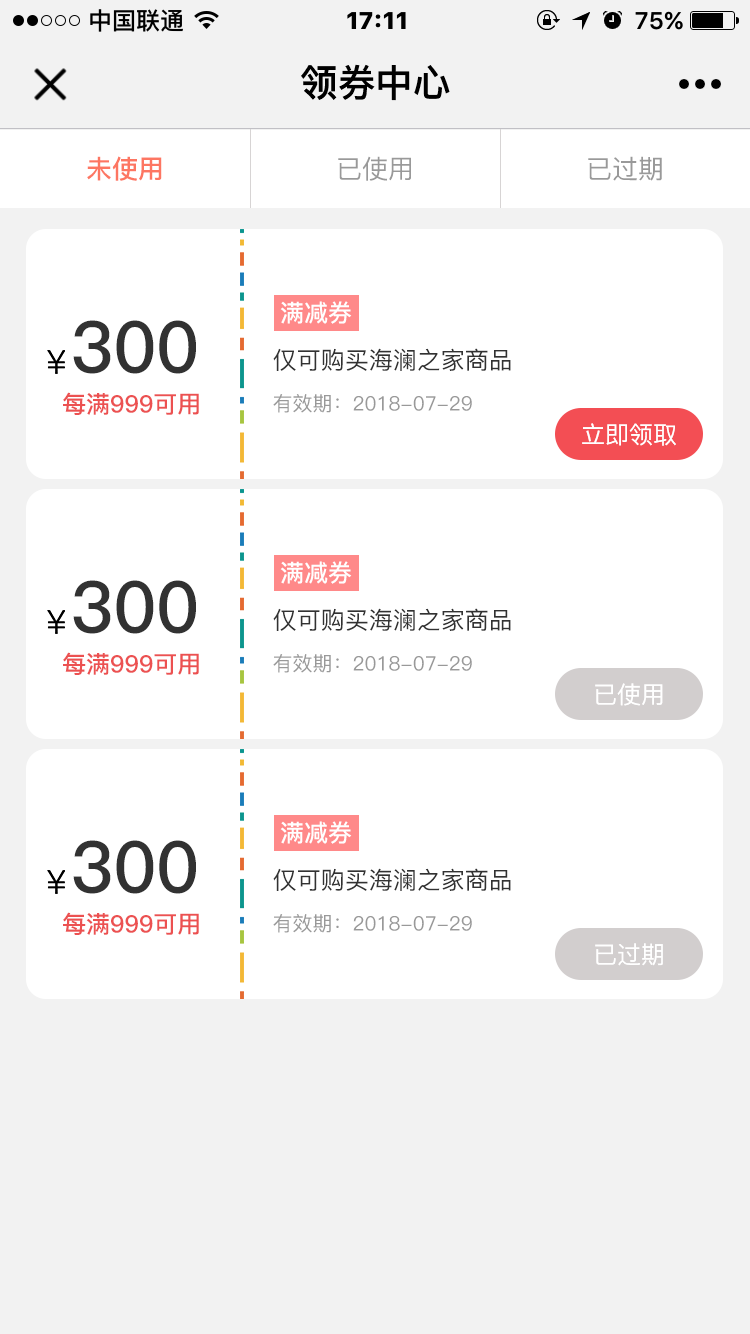
<style>
.page{position:relative;width:750px;height:1334px;background:#ffffff}
.page>*{position:absolute;margin:0}
.t1{font:37.6px "PingFang-SC-Heavy";color:#000000}
.t2{font:26px "PingFang-SC-Bold";color:#fd7662}
.t3{font:26px "PingFang-SC-Medium";color:#999999}
.t4{font:24px "PingFang-SC-Bold";color:#ffffff}
.t5{font:71.4px "PingFang-SC-Bold";color:#323232}
.t6{font:24px "PingFang-SC-Medium";color:#323232}
.t7{font:24px "PingFang-SC-Bold";color:#ec5151}
.t8{font:20px "PingFang-SC-Medium";color:#999999}
.t9{font:24px "PingFang-SC-Medium";color:#ffffff}
</style>
<div class="page">
<p class="t1" style="left:301px;top:64px;width:149px;height:37px">领券中心</p>
<p class="t2" style="left:87px;top:156px;width:75px;height:25px">未使用</p>
<p class="t3" style="left:338px;top:156px;width:73px;height:25px">已使用</p>
<p class="t3" style="left:588px;top:156px;width:74px;height:25px">已过期</p>
<p class="t4" style="left:280px;top:301px;width:72px;height:23px">满减券</p>
<p class="t5" style="left:73px;top:320px;width:123px;height:54px">300</p>
<p class="t6" style="left:273px;top:348px;width:238px;height:23px">仅可购买海澜之家商品</p>
<p class="t7" style="left:63px;top:392px;width:136px;height:23px">每满999可用</p>
<p class="t8" style="left:273px;top:394px;width:199px;height:19px">有效期：2018-07-29</p>
<p class="t9" style="left:582px;top:423px;width:94px;height:23px">立即领取</p>
<p class="t4" style="left:280px;top:561px;width:72px;height:23px">满减券</p>
<p class="t5" style="left:73px;top:580px;width:123px;height:54px">300</p>
<p class="t6" style="left:273px;top:608px;width:238px;height:23px">仅可购买海澜之家商品</p>
<p class="t7" style="left:63px;top:652px;width:136px;height:23px">每满999可用</p>
<p class="t8" style="left:273px;top:654px;width:199px;height:19px">有效期：2018-07-29</p>
<p class="t9" style="left:595px;top:683px;width:68px;height:23px">已使用</p>
<p class="t4" style="left:280px;top:821px;width:72px;height:23px">满减券</p>
<p class="t5" style="left:73px;top:840px;width:123px;height:54px">300</p>
<p class="t6" style="left:273px;top:868px;width:238px;height:23px">仅可购买海澜之家商品</p>
<p class="t7" style="left:63px;top:912px;width:136px;height:23px">每满999可用</p>
<p class="t8" style="left:273px;top:914px;width:199px;height:19px">有效期：2018-07-29</p>
<p class="t9" style="left:595px;top:943px;width:68px;height:23px">已过期</p>
</div>
